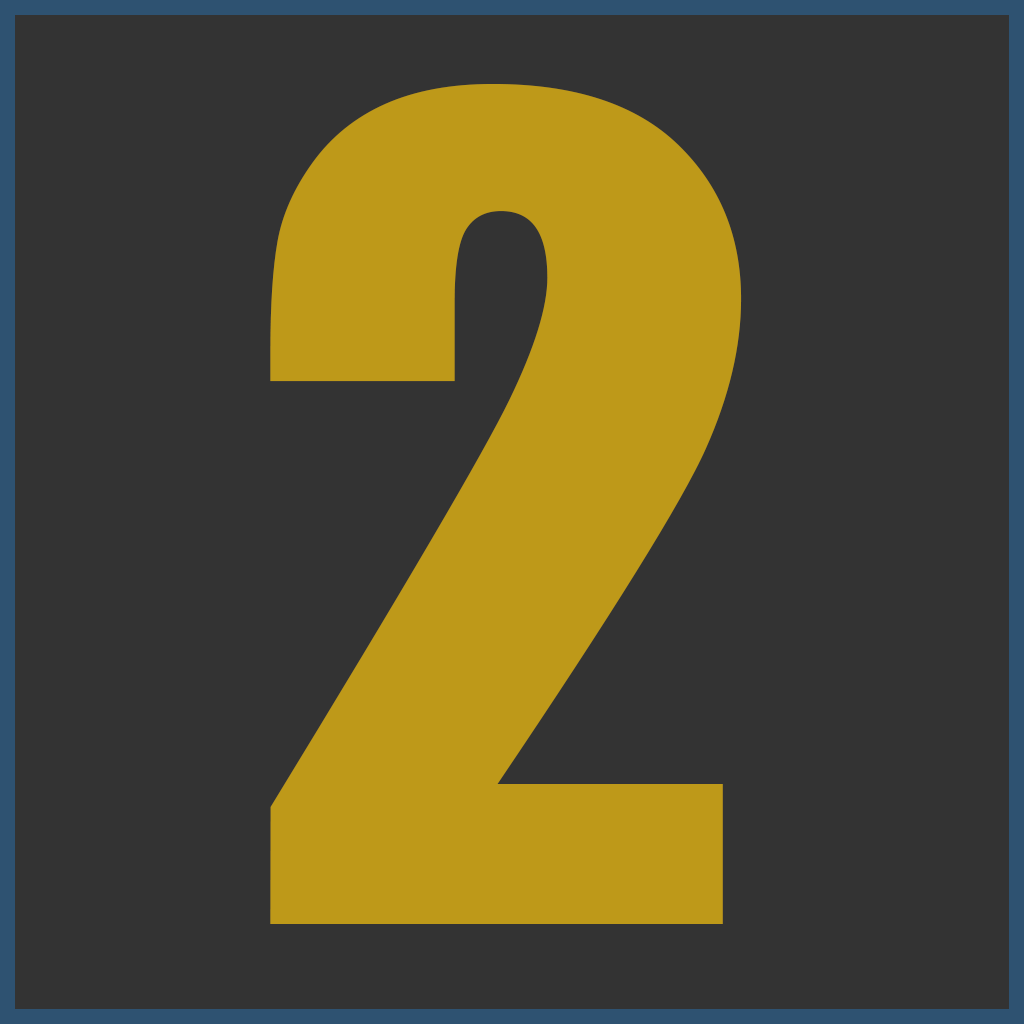
<style>
.page{position:relative;width:1024px;height:1024px;background:#333333}
.page>*{position:absolute;margin:0}
.t1{font:1041.7px "Impact";color:#be9919}
</style>
<div class="page">
<p class="t1" style="left:270px;top:84px;width:472px;height:840px">2</p>
</div>
